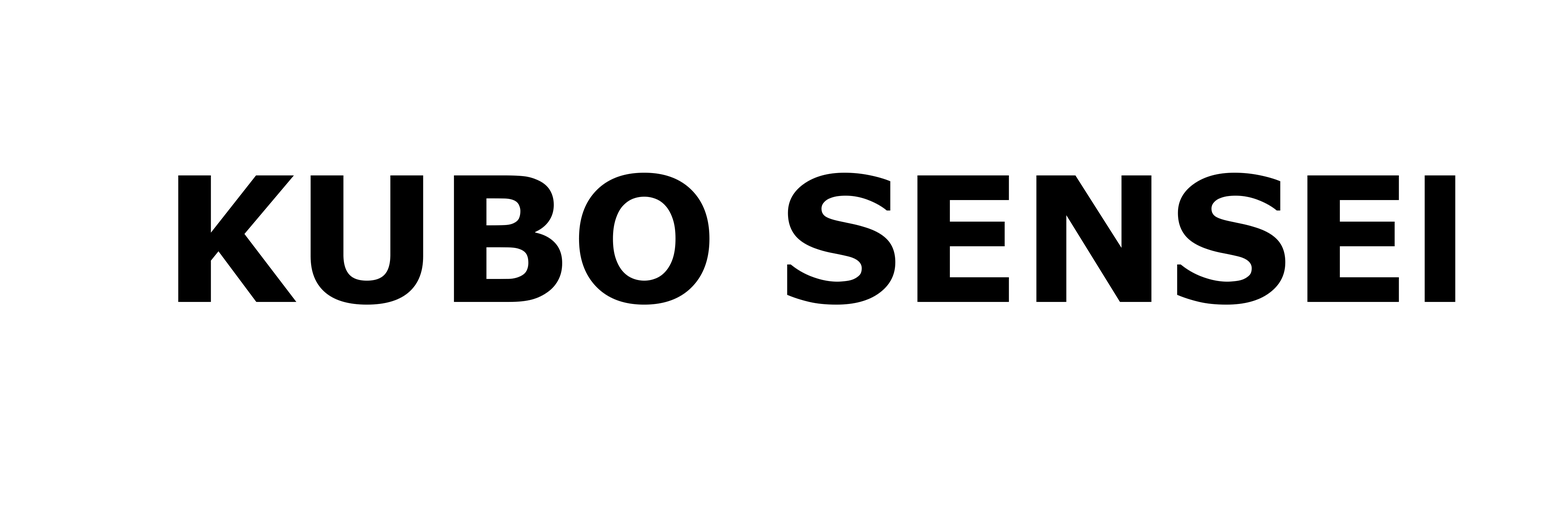
<style>
.page{position:relative;width:1568px;height:506px;background:#ffffff}
.page>*{position:absolute;margin:0}
.t1{font:174.1px "Verdana-Bold";color:#000000}
</style>
<div class="page">
<p class="t1" style="left:178px;top:170px;width:1277px;height:134px">KUBO SENSEl</p>
</div>
